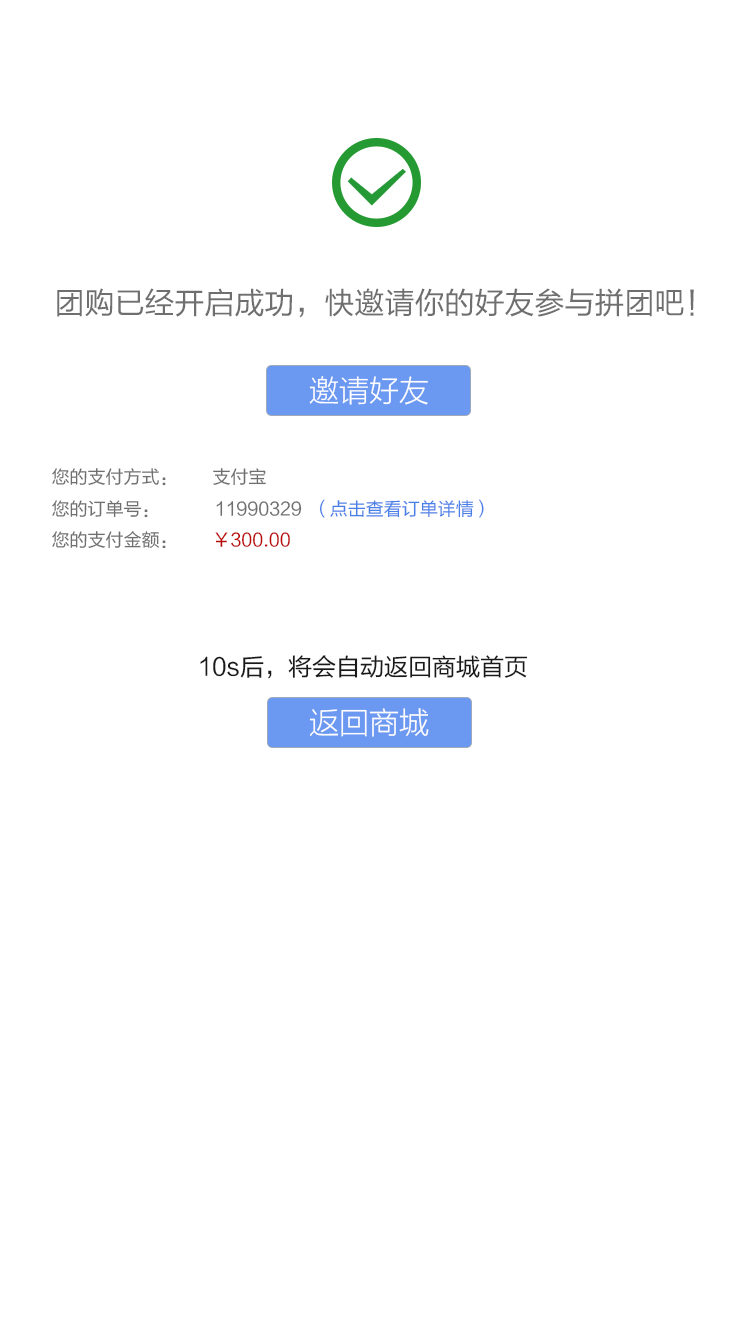
<style>
.page{position:relative;width:750px;height:1334px;background:#ffffff}
.page>*{position:absolute;margin:0}
.t1{font:30px "FZLTHK--GBK1-0";color:#6f6f6f}
.t2{font:30px "FZLTXHJW--GB1-0";color:#fffefe}
.t3{font:18px "FZLTHK--GBK1-0";color:#6f6f6f}
.t4{font:18px "FZLTHK--GBK1-0";color:#4980e7}
.t5{font:18px "FZLTHK--GBK1-0";color:#bc0b0b}
.t6{font:24px "FZLTHK--GBK1-0";color:#191919}
</style>
<div class="page">
<p class="t1" style="left:57px;top:288px;width:637px;height:30px">团购已经开启成功，快邀请你的好友参与拼团吧！</p>
<p class="t2" style="left:309px;top:376px;width:119px;height:29px">邀请好友</p>
<p class="t3" style="left:52px;top:468px;width:432px;height:81px">您的支付方式：       支付宝<br>您的订单号：           11990329  <span class="t4">（点击查看订单详情）<br></span>您的支付金额：       <span class="t5">￥300.00</span></p>
<p class="t6" style="left:200px;top:655px;width:328px;height:24px">10s后，将会自动返回商城首页</p>
<p class="t2" style="left:309px;top:708px;width:120px;height:29px">返回商城</p>
</div>
